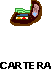
<style>
.page{position:relative;width:51px;height:69px;background:#ffffff}
.page>*{position:absolute;margin:0}
.t1{font:10.3px "Arial-BoldMT";color:#000000;scale:1.11 1}
</style>
<div class="page">
<p class="t1" style="left:0px;top:62px;width:51px;height:7px">CARTERA</p>
</div>
